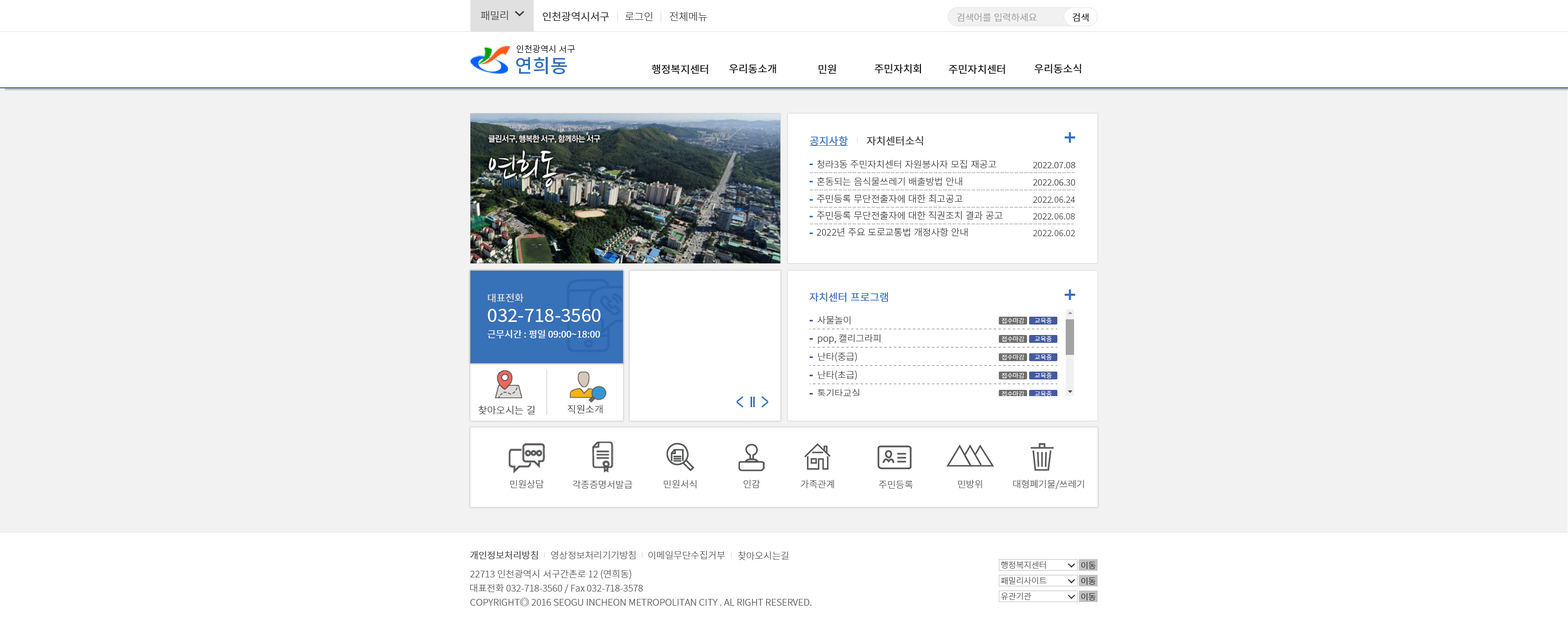
<style>
.page{position:relative;width:1568px;height:636px;background:#f2f2f2}
.page>*{position:absolute;margin:0}
.t1{font:10.5px "NotoSansKR-Light";color:#3e3e3e}
.t2{font:10.5px "NotoSansKR-Regular";color:#3e3e3e}
.t3{font:9.4px "NotoSansKR-Light";color:#929292}
.t4{font:9.4px "NotoSansKR-Regular";color:#2c2c2c}
.t5{font:8.6px "NotoSansKR-Light";color:#000000}
.t6{font:18.8px "NotoSansKR-Medium";color:#3371be}
.t7{font:10.5px "NotoSansKR-Regular";color:#0d0d0d}
.t8{font:10.5px "NotoSansKR-Regular";color:#3371be}
.t9{font:9.4px "NotoSansKR-Light";color:#3e3e3e}
.t10{font:8.9px "NotoSansKR-Light";color:#3e3e3e}
.t11{font:9.9px "NotoSansKR-Regular";color:#e0e0e0}
.t12{font:18.3px "NotoSansKR-Regular";color:#ffffff}
.t13{font:6.3px "NotoSansKR-Light";color:#ffffff}
.t14{font:9.4px "NotoSansKR-Regular";color:#ffffff}
.t15{font:9.9px "NotoSansKR-Light";color:#343434}
.t16{font:9.4px "NotoSansKR-Light";color:#505050}
.t17{font:9.4px "NotoSansKR-Regular";color:#545555}
.t18{font:9.4px "NotoSansKR-Light";color:#545555}
.t19{font:8.4px "NotoSansKR-Light";color:#545555}
.t20{font:8.4px "NotoSansKR-Light";color:#232323}
</style>
<div class="page">
<p class="t1" style="left:481px;top:10px;width:27px;height:10px">패밀리</p>
<p class="t2" style="left:543px;top:11px;width:66px;height:10px">인천광역시서구</p>
<p class="t1" style="left:625px;top:11px;width:28px;height:10px">로그인</p>
<p class="t1" style="left:670px;top:11px;width:37px;height:10px">전체메뉴</p>
<p class="t3" style="left:957px;top:13px;width:80px;height:9px">검색어를 입력하세요</p>
<p class="t4" style="left:1073px;top:13px;width:16px;height:9px">검색</p>
<p class="t5" style="left:516px;top:45px;width:59px;height:8px">인천광역시 서구</p>
<p class="t6" style="left:516px;top:56px;width:51px;height:18px">연희동</p>
<p class="t7" style="left:652px;top:64px;width:56px;height:10px">행정복지센터</p>
<p class="t7" style="left:729px;top:64px;width:47px;height:10px">우리동소개</p>
<p class="t7" style="left:818px;top:64px;width:18px;height:10px">민원</p>
<p class="t7" style="left:874px;top:64px;width:47px;height:10px">주민자치회</p>
<p class="t7" style="left:949px;top:64px;width:56px;height:10px">주민자치센터</p>
<p class="t7" style="left:1034px;top:64px;width:47px;height:10px">우리동소식</p>
<p class="t8" style="left:810px;top:136px;width:38px;height:10px">공지사항</p>
<p class="t2" style="left:867px;top:136px;width:56px;height:10px">자치센터소식</p>
<p class="t9" style="left:817px;top:160px;width:179px;height:9px">청라3동 주민자치센터 자원봉사자 모집 재공고</p>
<p class="t10" style="left:1033px;top:162px;width:42px;height:6px">2022.07.08</p>
<p class="t9" style="left:817px;top:177px;width:145px;height:9px">혼동되는 음식물쓰레기 배출방법 안내</p>
<p class="t10" style="left:1033px;top:179px;width:42px;height:7px">2022.06.30</p>
<p class="t9" style="left:817px;top:194px;width:146px;height:9px">주민등록 무단전출자에 대한 최고공고</p>
<p class="t10" style="left:1033px;top:197px;width:42px;height:6px">2022.06.24</p>
<p class="t9" style="left:817px;top:211px;width:185px;height:9px">주민등록 무단전출자에 대한 직권조치 결과 공고</p>
<p class="t10" style="left:1033px;top:213px;width:42px;height:7px">2022.06.08</p>
<p class="t9" style="left:816px;top:227px;width:151px;height:10px">2022년 주요 도로교통법 개정사항 안내</p>
<p class="t10" style="left:1033px;top:230px;width:42px;height:6px">2022.06.02</p>
<p class="t11" style="left:488px;top:293px;width:36px;height:10px">대표전화</p>
<p class="t8" style="left:809px;top:292px;width:79px;height:10px">자치센터 프로그램</p>
<p class="t12" style="left:488px;top:309px;width:113px;height:13px">032-718-3560</p>
<p class="t9" style="left:817px;top:316px;width:33px;height:9px">사물놀이</p>
<p class="t13" style="left:1001px;top:318px;width:23px;height:6px">접수마감</p>
<p class="t13" style="left:1034px;top:318px;width:18px;height:6px">교육중</p>
<p class="t14" style="left:488px;top:330px;width:112px;height:9px">근무시간 : 평일 09:00~18:00</p>
<p class="t9" style="left:818px;top:334px;width:63px;height:10px">pop, 캘리그라피</p>
<p class="t13" style="left:1001px;top:336px;width:23px;height:6px">접수마감</p>
<p class="t13" style="left:1034px;top:336px;width:18px;height:6px">교육중</p>
<p class="t9" style="left:818px;top:352px;width:39px;height:10px">난타(중급)</p>
<p class="t13" style="left:1001px;top:354px;width:23px;height:6px">접수마감</p>
<p class="t13" style="left:1034px;top:354px;width:18px;height:6px">교육중</p>
<p class="t9" style="left:818px;top:371px;width:39px;height:9px">난타(초급)</p>
<p class="t13" style="left:1001px;top:373px;width:23px;height:5px">접수마감</p>
<p class="t13" style="left:1034px;top:373px;width:18px;height:5px">교육중</p>
<p class="t9" style="left:817px;top:389px;width:43px;height:9px">통기타교실</p>
<p class="t13" style="left:1001px;top:391px;width:23px;height:6px">접수마감</p>
<p class="t13" style="left:1034px;top:391px;width:18px;height:6px">교육중</p>
<p class="t15" style="left:478px;top:406px;width:57px;height:8px">찾아오시는 길</p>
<p class="t15" style="left:568px;top:405px;width:35px;height:9px">직원소개</p>
<p class="t16" style="left:510px;top:480px;width:34px;height:8px">민원상담</p>
<p class="t16" style="left:572px;top:480px;width:60px;height:9px">각종증명서발급</p>
<p class="t16" style="left:664px;top:480px;width:33px;height:9px">민원서식</p>
<p class="t16" style="left:743px;top:480px;width:17px;height:8px">인감</p>
<p class="t16" style="left:801px;top:480px;width:33px;height:9px">가족관계</p>
<p class="t16" style="left:879px;top:480px;width:34px;height:9px">주민등록</p>
<p class="t16" style="left:958px;top:480px;width:24px;height:9px">민방위</p>
<p class="t16" style="left:1013px;top:480px;width:71px;height:10px">대형폐기물/쓰레기</p>
<p class="t17" style="left:470px;top:551px;width:68px;height:9px">개인정보처리방침</p>
<p class="t18" style="left:551px;top:551px;width:85px;height:9px">영상정보처리기기방침</p>
<p class="t18" style="left:648px;top:551px;width:77px;height:9px">이메일무단수집거부</p>
<p class="t18" style="left:738px;top:551px;width:51px;height:9px">찾아오시는길</p>
<p class="t18" style="left:470px;top:570px;width:161px;height:9px">22713 인천광역시 서구간촌로 12 (연희동)</p>
<p class="t19" style="left:1001px;top:561px;width:45px;height:8px">행정복지센터</p>
<p class="t20" style="left:1081px;top:561px;width:15px;height:8px">이동</p>
<p class="t19" style="left:1001px;top:577px;width:46px;height:8px">패밀리사이트</p>
<p class="t20" style="left:1081px;top:577px;width:15px;height:8px">이동</p>
<p class="t18" style="left:470px;top:584px;width:173px;height:10px">대표전화 032-718-3560 / Fax 032-718-3578</p>
<p class="t19" style="left:1001px;top:592px;width:30px;height:8px">유관기관</p>
<p class="t20" style="left:1081px;top:593px;width:15px;height:8px">이동</p>
<p class="t18" style="left:470px;top:598px;width:342px;height:8px">COPYRIGHT◎ 2016 SEOGU INCHEON METROPOLITAN CITY . AL RIGHT RESERVED.</p>
</div>
